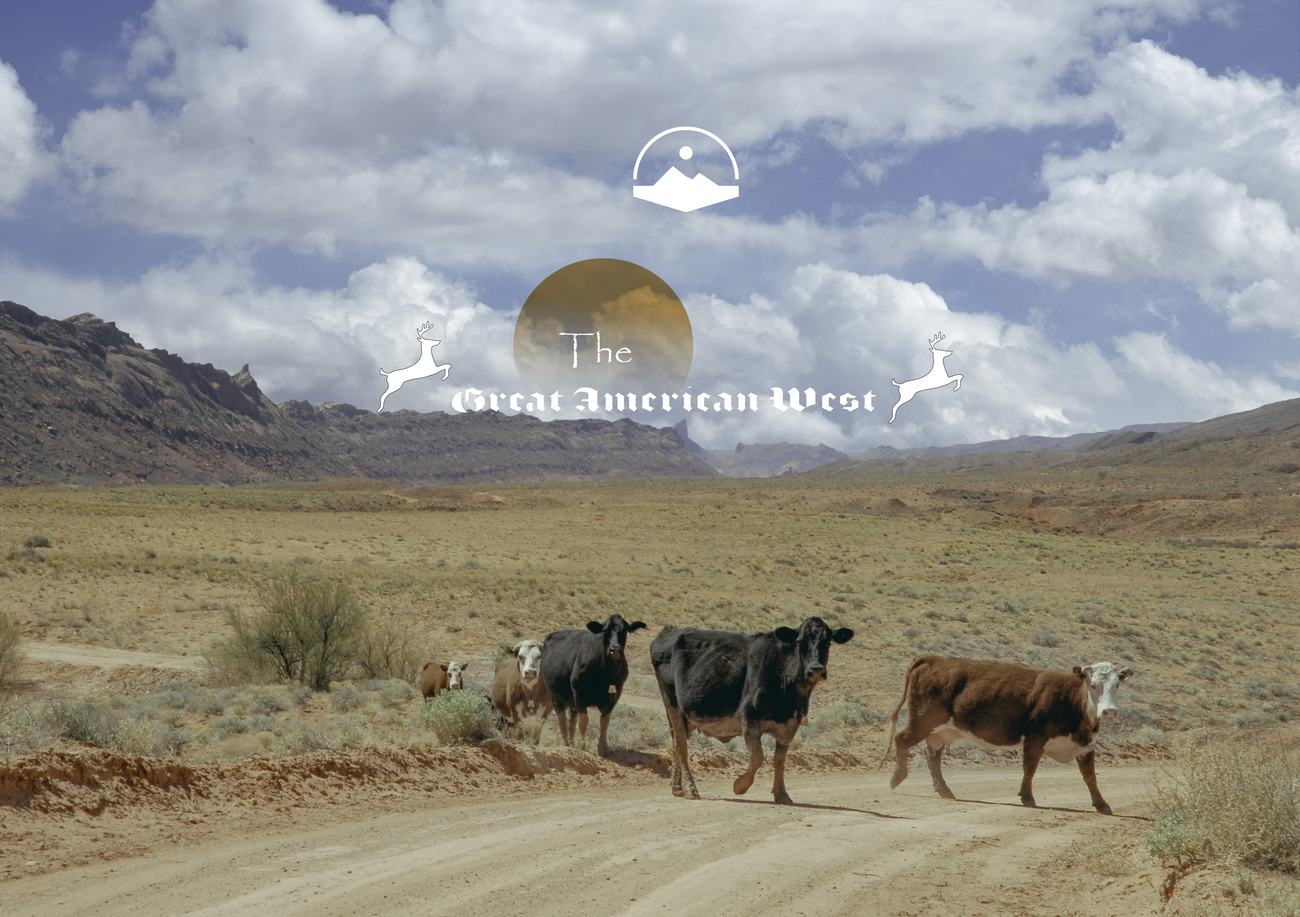
<style>
.page{position:relative;width:1300px;height:917px}
.page>*{position:absolute;margin:0}
.t1{font:37.8px "Papyrus-Regular";color:#ffffff}
.t2{font:37.8px "Avebury-Black";color:#ffffff}
</style>
<div class="page">
<p class="t1" style="left:559px;top:331px;width:72px;height:38px">The</p>
<p class="t2" style="left:451px;top:385px;width:426px;height:29px">Great American West</p>
</div>
